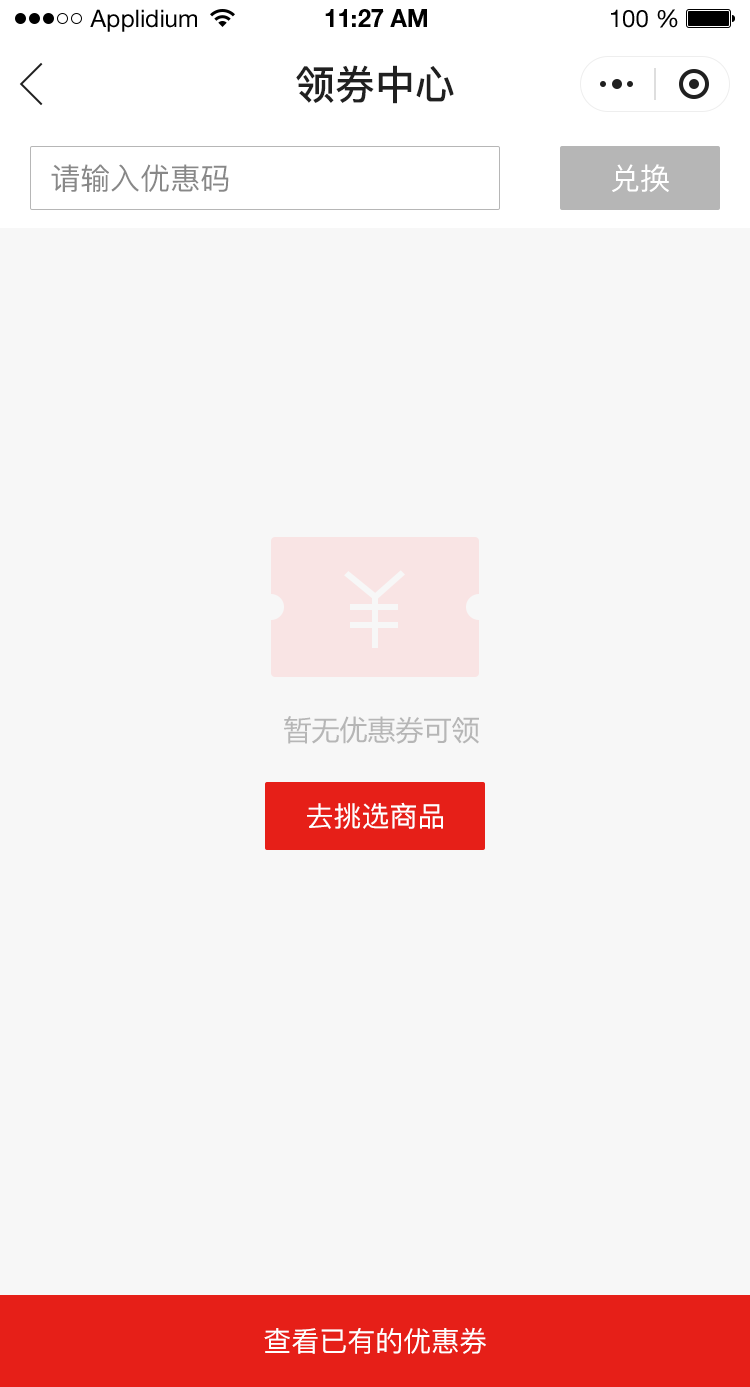
<style>
.page{position:relative;width:750px;height:1387px;background:#f7f7f7}
.page>*{position:absolute;margin:0}
.t1{font:24px "HelveticaNeueLTStd-Roman";color:#000000}
.t2{font:24px "HelveticaNeueLTStd-Bd";color:#000000}
.t3{font:40px "PingFang-SC-Bold";color:#202020;text-transform:uppercase}
.t4{font:30px "PingFang-SC-Medium";color:#888888;text-transform:uppercase}
.t5{font:30px "PingFang-SC-Medium";color:#ffffff;text-transform:uppercase}
.t6{font:28px "MicrosoftYaHei";color:#b6b6b6;text-transform:uppercase}
.t7{font:28px "PingFang-SC-Medium";color:#ffffff;text-transform:uppercase}
</style>
<div class="page">
<p class="t1" style="left:90px;top:9px;width:107px;height:23px">Applidium</p>
<p class="t2" style="left:325px;top:9px;width:102px;height:18px">11:27 AM</p>
<p class="t1" style="left:611px;top:9px;width:67px;height:19px">100 %</p>
<p class="t3" style="left:296px;top:65px;width:158px;height:39px">领券中心</p>
<p class="t4" style="left:51px;top:164px;width:178px;height:28px">请输入优惠码</p>
<p class="t5" style="left:612px;top:164px;width:57px;height:28px">兑换</p>
<p class="t6" style="left:284px;top:716px;width:195px;height:28px">暂无优惠券可领</p>
<p class="t7" style="left:307px;top:802px;width:136px;height:27px">去挑选商品</p>
<p class="t7" style="left:264px;top:1327px;width:222px;height:27px">查看已有的优惠券</p>
</div>
